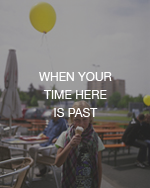
<style>
.page{position:relative;width:150px;height:188px}
.page>*{position:absolute;margin:0}
.t1{font:12px/18px "HelveticaNeue";color:#fefefe}
</style>
<div class="page">
<p class="t1" style="left:39px;top:72px;width:73px;height:45px;text-align:center">WHEN YOUR<br>TIME HERE <br>IS PAST</p>
</div>
